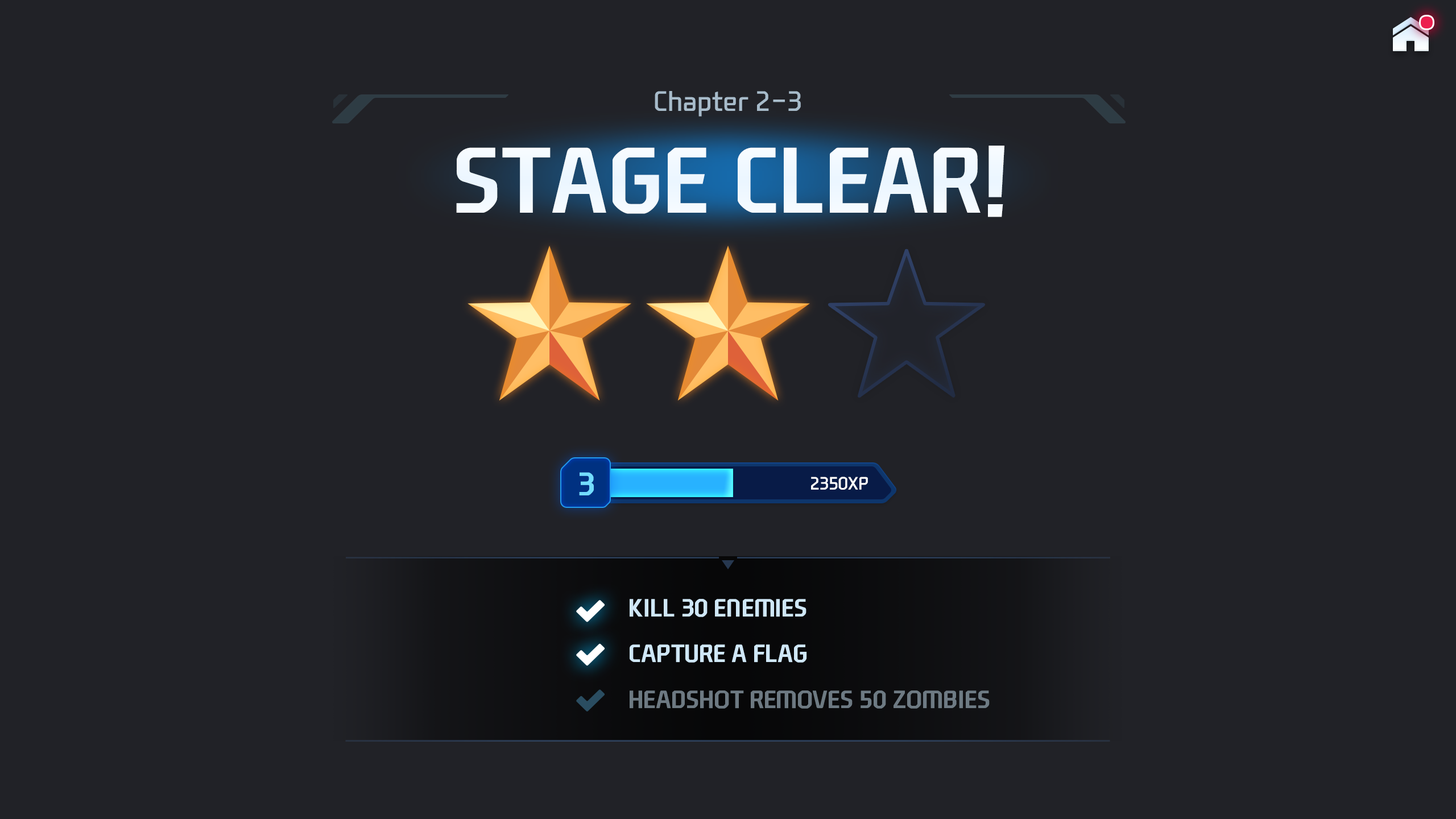
<style>
.page{position:relative;width:1456px;height:819px;background:#212227}
.page>*{position:absolute;margin:0}
.t1{font:27.3px "NEXONFootballGothicL";color:#a7bbca}
.t2{font:89.5px "NEXONFootballGothicB";color:#ffffff;text-transform:uppercase}
.t3{font:31.4px "NEXONFootballGothicB";color:#73dcff}
.t4{font:17.1px "NEXONFootballGothicL";color:#ffffff}
.t5{font:24px "NEXONFootballGothicB";color:#cfe7f7;text-transform:uppercase}
.t6{font:24px "NEXONFootballGothicB";color:#6d7a82;text-transform:uppercase}
</style>
<div class="page">
<p class="t1" style="left:655px;top:91px;width:146px;height:26px">Chapter 2-3</p>
<p class="t2" style="left:456px;top:146px;width:548px;height:71px">Stage clear!</p>
<p class="t3" style="left:579px;top:472px;width:15px;height:23px">3</p>
<p class="t4" style="left:811px;top:477px;width:57px;height:13px">2350XP</p>
<p class="t5" style="left:630px;top:599px;width:176px;height:18px">Kill 30 Enemies</p>
<p class="t5" style="left:630px;top:644px;width:177px;height:19px">Capture a Flag</p>
<p class="t6" style="left:630px;top:690px;width:360px;height:19px">Headshot removes 50 zombies</p>
</div>
